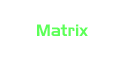
<style>
.page{position:relative;width:123px;height:60px;background:#ffffff}
.page>*{position:absolute;margin:0}
.t1{font:16px "AeroRegularSWFTE";color:#5cff58}
</style>
<div class="page">
<p class="t1" style="left:37px;top:24px;width:51px;height:12px">Matrix</p>
</div>
